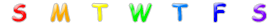
<style>
.page{position:relative;width:280px;height:25px;background:#ffffff}
.page>*{position:absolute;margin:0}
.t1{font:22px "ComicSansMS";letter-spacing:0.005em;color:#ff0707;font-weight:bold}
.t2{font:22px "ComicSansMS";letter-spacing:0.005em;color:#ffaf00;font-weight:bold}
.t3{font:22px "ComicSansMS";letter-spacing:0.005em;color:#ffff00;font-weight:bold}
.t4{font:22px "ComicSansMS";letter-spacing:0.005em;font-weight:bold}
.t5{font:22px "ComicSansMS";letter-spacing:0.005em;color:#007fff;font-weight:bold}
.t6{font:22px "ComicSansMS";letter-spacing:0.005em;color:#0000ff;font-weight:bold}
.t7{font:22px "ComicSansMS";letter-spacing:0.005em;color:#7f00ff;font-weight:bold}
</style>
<div class="page">
<p class="t1" style="left:12px;top:4px;width:14px;height:18px">S</p>
<p class="t2" style="left:51px;top:3px;width:19px;height:19px">M</p>
<p class="t3" style="left:92px;top:3px;width:16px;height:18px">T</p>
<p class="t4" style="left:129px;top:3px;width:23px;height:19px">W</p>
<p class="t5" style="left:172px;top:3px;width:16px;height:18px">T</p>
<p class="t6" style="left:214px;top:3px;width:12px;height:19px">F</p>
<p class="t7" style="left:252px;top:4px;width:14px;height:18px">S</p>
</div>
